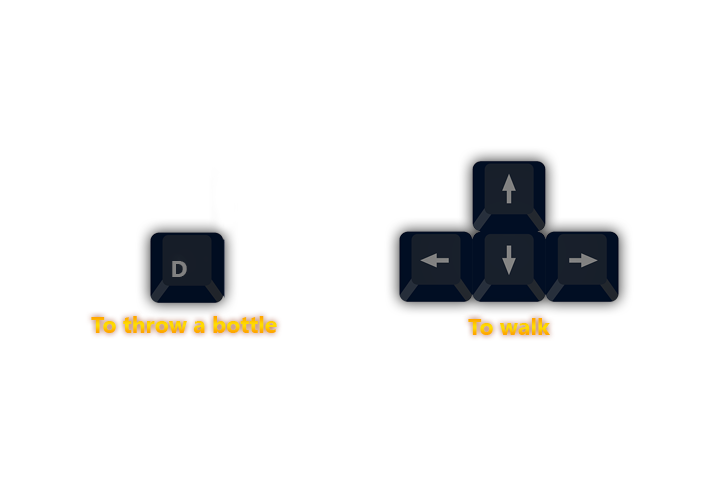
<style>
.page{position:relative;width:720px;height:480px;background:#ffffff}
.page>*{position:absolute;margin:0}
.t1{font:23px "LeelawadeeUI-Bold";color:#818181}
.t2{font:23px "LeelawadeeUI-Bold";color:#ffc800}
.t3{font:23px "LeelawadeeUI-Bold"}
</style>
<div class="page">
<p class="t1" style="left:172px;top:261px;width:15px;height:16px">D</p>
<p class="t2" style="left:91px;top:316px;width:186px;height:17px">To throw a bottle</p>
<p class="t3" style="left:468px;top:318px;width:82px;height:17px">To walk</p>
</div>
